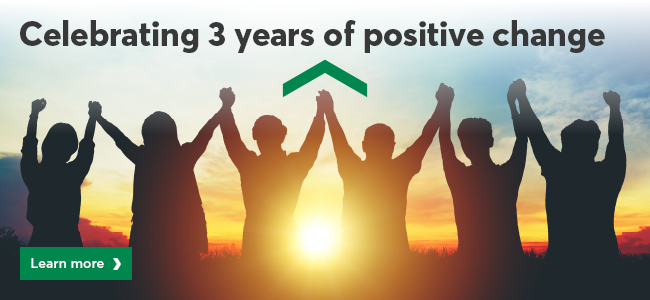
<style>
.page{position:relative;width:650px;height:300px}
.page>*{position:absolute;margin:0}
.t1{font:34px "Averta-ExtraBold";color:#383838}
.t2{font:14px "Averta-Semibold";color:#ffffff}
</style>
<div class="page">
<p class="t1" style="left:20px;top:20px;width:585px;height:33px">Celebrating 3 years of positive change</p>
<p class="t2" style="left:31px;top:258px;width:73px;height:10px">Learn more</p>
</div>
